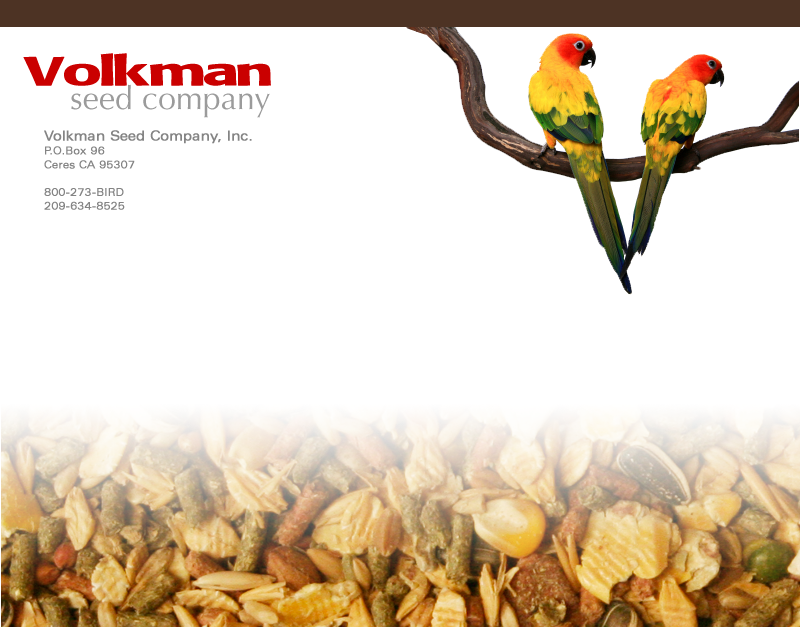
<style>
.page{position:relative;width:800px;height:627px;background:#ffffff}
.page>*{position:absolute;margin:0}
.t1{font:44.9px "MARKETPRO-Normal";color:#ca0000}
.t2{font:32.2px "OptimaLTStd";color:#9b9b9b}
.t3{font:10.7px/13.8px "ZurichBT-RomanExtended";color:#848484;font-weight:bold;scale:0.9 1}
.t4{font:13.8px/13.8px "ZurichBT-RomanExtended";color:#848484;font-weight:bold;scale:0.9 1}
</style>
<div class="page">
<p class="t1" style="left:23px;top:53px;width:248px;height:33px">Volkman</p>
<p class="t2" style="left:71px;top:84px;width:199px;height:34px">seed company</p>
<p class="t3" style="left:44px;top:130px;width:208px;height:80px"><span class="t4">Volkman Seed Company, Inc.<br></span>P.O.Box 96<br>Ceres CA 95307<br><br>800-273-BIRD<br>209-634-8525</p>
</div>
